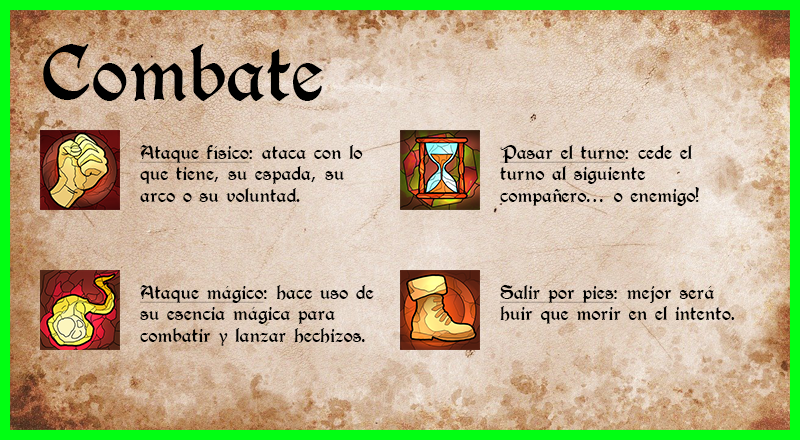
<style>
.page{position:relative;width:800px;height:440px}
.page>*{position:absolute;margin:0}
.t1{font:72px "T4C-Beaulieux";color:#000000}
.t2{font:18px "T4C-Beaulieux";color:#000000}
.t3{font:18px "T4C-Beaulieux";color:#000000;text-decoration:underline}
</style>
<div class="page">
<p class="t1" style="left:43px;top:44px;width:280px;height:57px">Combate</p>
<p class="t2" style="left:140px;top:145px;width:223px;height:57px"><span class="t3">Ataque físico</span>: ataca con lo que tiene, su espada, su arco o su voluntad.</p>
<p class="t2" style="left:500px;top:145px;width:199px;height:61px"><span class="t3">Pasar el turno</span>: cede el turno al siguiente compañero... o enemigo!</p>
<p class="t2" style="left:140px;top:285px;width:234px;height:61px"><span class="t3">Ataque mágico</span>: hace uso de su esencia mágica para combatir y lanzar hechizos.</p>
<p class="t2" style="left:500px;top:285px;width:235px;height:39px"><span class="t3">Salir por pies</span>: mejor será huir que morir en el intento.</p>
</div>
